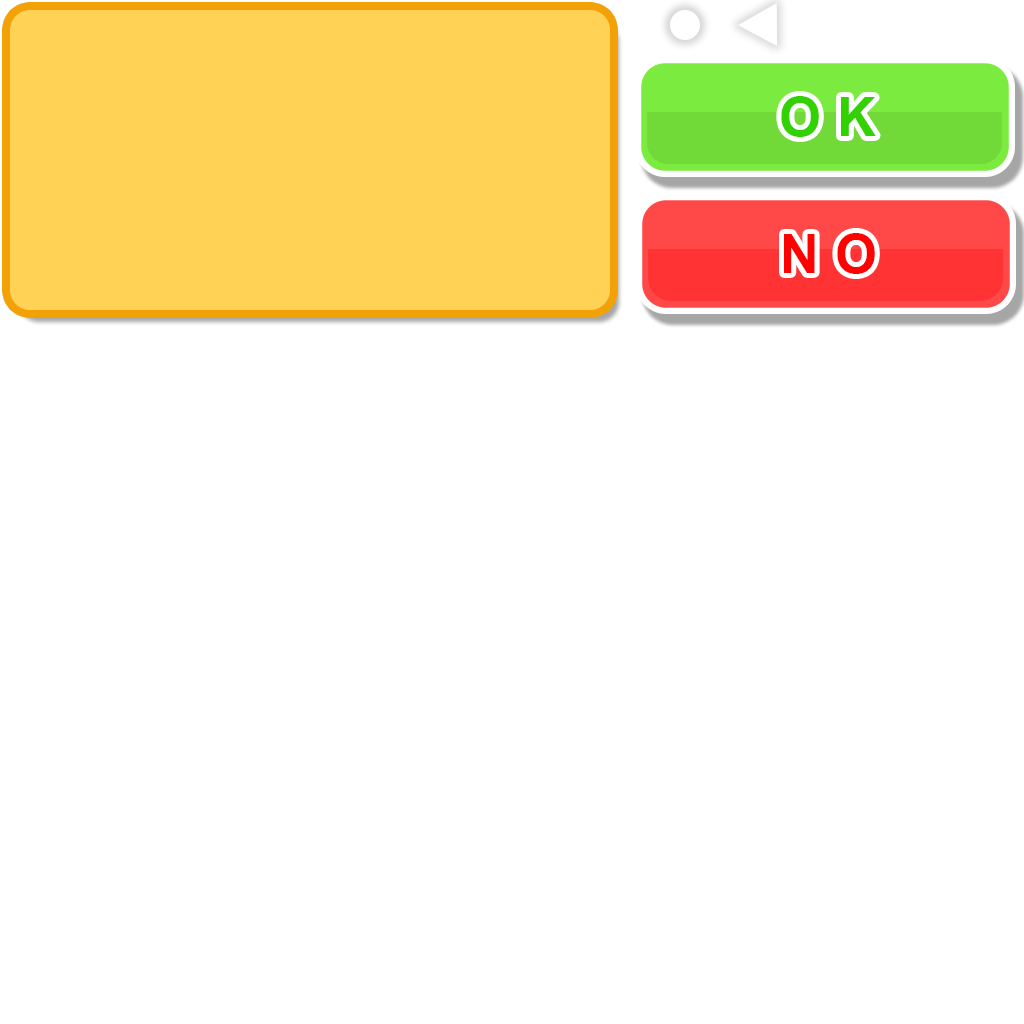
<style>
.page{position:relative;width:1024px;height:1024px;background:#ffffff}
.page>*{position:absolute;margin:0}
.t1{font:54.2px "Arial-BoldMT";color:#31d200}
.t2{font:54.2px "Arial-BoldMT";color:#ff0101}
</style>
<div class="page">
<p class="t1" style="left:781px;top:96px;width:95px;height:41px">O K</p>
<p class="t2" style="left:784px;top:233px;width:91px;height:41px">N O</p>
</div>
